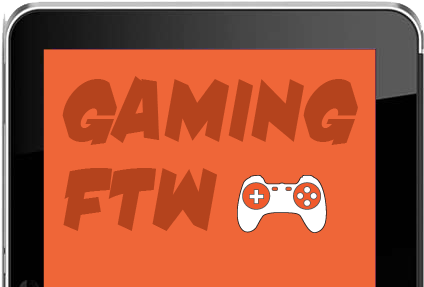
<style>
.page{position:relative;width:424px;height:287px;background:#ef6638}
.page>*{position:absolute;margin:0}
.t1{font:88.3px "DamnNoisyKids";color:#b4431d}
</style>
<div class="page">
<p class="t1" style="left:62px;top:76px;width:296px;height:69px">GAMING</p>
<p class="t1" style="left:63px;top:168px;width:154px;height:63px">FTW</p>
</div>
